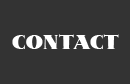
<style>
.page{position:relative;width:130px;height:84px;background:#333333}
.page>*{position:absolute;margin:0}
.t1{font:20px "Vogue";color:#ffffff}
</style>
<div class="page">
<p class="t1" style="left:12px;top:34px;width:107px;height:15px">CONTACT</p>
</div>
